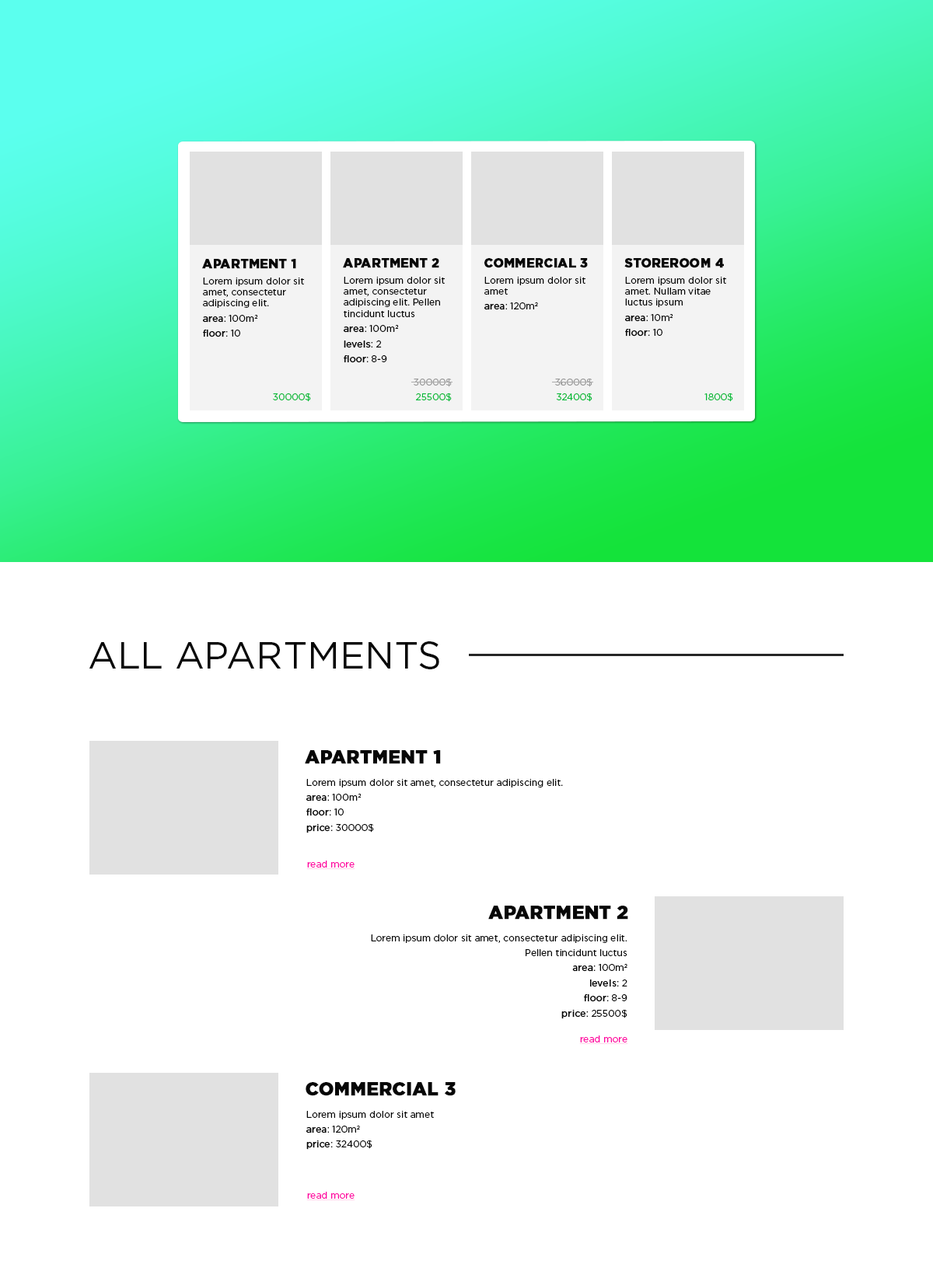
<style>
.page{position:relative;width:933px;height:1278px;background:#ffffff}
.page>*{position:absolute;margin:0}
.t1{font:12.4px "GothamPro-Black";color:#070707;font-weight:bold}
.t2{font:9.3px "GothamPro";color:#070707}
.t3{font:9.3px "GothamPro";color:#070707;font-weight:bold}
.t4{font:9.3px "GothamPro";color:#9b9b9b}
.t5{font:9.3px "GothamPro";color:#07bb39}
.t6{font:37.3px "GothamPro";color:#070707}
.t7{font:18px "GothamPro-Black";color:#070707;font-weight:bold}
.t8{font:9.3px "GothamPro";color:#ff00a2;text-decoration:underline}
</style>
<div class="page">
<p class="t1" style="left:202px;top:259px;width:94px;height:10px">APARTMENT 1</p>
<p class="t1" style="left:343px;top:258px;width:96px;height:10px">APARTMENT 2</p>
<p class="t1" style="left:484px;top:258px;width:104px;height:10px">COMMERCIAL 3</p>
<p class="t1" style="left:624px;top:258px;width:100px;height:10px">STOREROOM 4</p>
<p class="t2" style="left:203px;top:278px;width:101px;height:59px">Lorem ipsum dolor sit amet, consectetur adipiscing elit.<br><span class="t3">area</span>: 100m2<br><span class="t3">floor</span>: 10</p>
<p class="t2" style="left:344px;top:277px;width:101px;height:86px">Lorem ipsum dolor sit amet, consectetur adipiscing elit. Pellen tincidunt luctus<br><span class="t3">area</span>: 100m2<br><span class="t3">levels</span>: 2<br><span class="t3">floor</span>: 8-9</p>
<p class="t2" style="left:484px;top:277px;width:101px;height:33px">Lorem ipsum dolor sit amet<br><span class="t3">area</span>: 120m2</p>
<p class="t2" style="left:625px;top:277px;width:101px;height:60px">Lorem ipsum dolor sit amet. Nullam vitae luctus ipsum<br><span class="t3">area</span>: 10m2<br><span class="t3">floor</span>: 10</p>
<p class="t4" style="left:414px;top:379px;width:38px;height:23px;text-align:right">30000$<br><span class="t5">25500$</span></p>
<p class="t4" style="left:555px;top:379px;width:37px;height:23px;text-align:right">36000$<br><span class="t5">32400$</span></p>
<p class="t5" style="left:273px;top:393px;width:38px;height:9px">30000$</p>
<p class="t5" style="left:704px;top:393px;width:29px;height:9px">1800$</p>
<p class="t6" style="left:89px;top:641px;width:350px;height:28px">ALL APARTMENTS</p>
<p class="t7" style="left:305px;top:750px;width:136px;height:14px">APARTMENT 1</p>
<p class="t2" style="left:306px;top:779px;width:257px;height:54px">Lorem ipsum dolor sit amet, consectetur adipiscing elit.<br><span class="t3">area</span>: 100m2<br><span class="t3">floor</span>: 10<br><span class="t3">price</span>: 30000$</p>
<p class="t8" style="left:306px;top:861px;width:49px;height:8px">read more</p>
<p class="t7" style="left:488px;top:906px;width:140px;height:14px">APARTMENT 2</p>
<p class="t2" style="left:371px;top:935px;width:256px;height:84px;text-align:right">Lorem ipsum dolor sit amet, consectetur adipiscing elit. <br>Pellen tincidunt luctus<br><span class="t3">area</span>: 100m2<br><span class="t3">levels</span>: 2<br><span class="t3">floor</span>: 8-9<br><span class="t3">price</span>: 25500$</p>
<p class="t8" style="left:579px;top:1036px;width:49px;height:8px">read more</p>
<p class="t7" style="left:306px;top:1082px;width:150px;height:14px">COMMERCIAL 3</p>
<p class="t2" style="left:306px;top:1111px;width:128px;height:39px">Lorem ipsum dolor sit amet<br><span class="t3">area</span>: 120m2<br><span class="t3">price</span>: 32400$</p>
<p class="t8" style="left:306px;top:1192px;width:49px;height:8px">read more</p>
</div>
